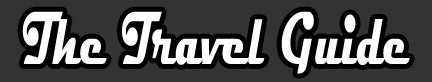
<style>
.page{position:relative;width:432px;height:82px;background:#333333}
.page>*{position:absolute;margin:0}
.t1{font:76px "Magneto-Bold";color:#ffffff;scale:0.54 1}
</style>
<div class="page">
<p class="t1" style="left:22px;top:11px;width:388px;height:63px">The Travel Guide</p>
</div>
